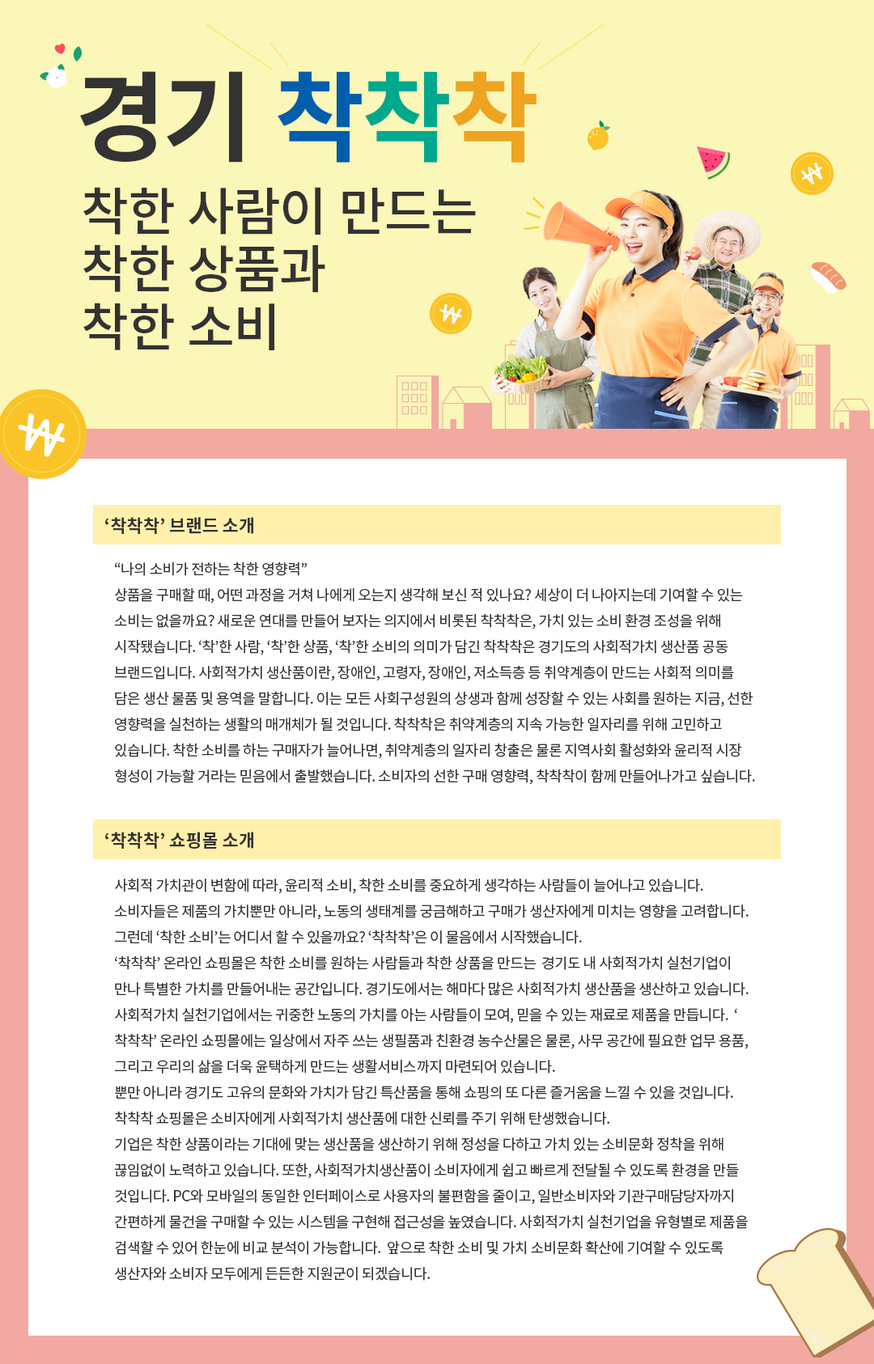
<style>
.page{position:relative;width:874px;height:1364px;background:#ffffff}
.page>*{position:absolute;margin:0}
.t1{font:98.1px "NotoSansCJKkr-Bold";letter-spacing:-0.03em;color:#333333}
.t2{font:98.1px "NotoSansCJKkr-Bold";letter-spacing:-0.03em;color:#015eac}
.t3{font:98.1px "NotoSansCJKkr-Bold";letter-spacing:-0.03em;color:#00a88e}
.t4{font:98.1px "NotoSansCJKkr-Bold";letter-spacing:-0.03em;color:#eea421}
.t5{font:51.7px/57.7px "NotoSansCJKkr-Medium";letter-spacing:-0.03em;color:#333333}
.t6{font:17.8px "NotoSansCJKkr-Bold";color:#333333}
.t7{font:14.6px/25.9px "NotoSansCJKkr-Regular";letter-spacing:-0.03em;color:#333333}
</style>
<div class="page">
<p class="t1" style="left:80px;top:71px;width:457px;height:92px">경기 <span class="t2">착</span><span class="t3">착</span><span class="t4">착</span></p>
<p class="t5" style="left:83px;top:187px;width:393px;height:163px">착한 사람이 만드는<br>착한 상품과<br>착한 소비</p>
<p class="t6" style="left:105px;top:517px;width:148px;height:17px">‘착착착’ 브랜드 소개</p>
<p class="t7" style="left:114px;top:562px;width:641px;height:223px">“나의 소비가 전하는 착한 영향력”<br>상품을 구매할 때, 어떤 과정을 거쳐 나에게 오는지 생각해 보신 적 있나요? 세상이 더 나아지는데 기여할 수 있는 소비는 없을까요? 새로운 연대를 만들어 보자는 의지에서 비롯된 착착착은, 가치 있는 소비 환경 조성을 위해 시작됐습니다. ‘착’한 사람, ‘착’한 상품, ‘착’한 소비의 의미가 담긴 착착착은 경기도의 사회적가치 생산품 공동 브랜드입니다. 사회적가치 생산품이란, 장애인, 고령자, 장애인, 저소득층 등 취약계층이 만드는 사회적 의미를 담은 생산 물품 및 용역을 말합니다. 이는 모든 사회구성원의 상생과 함께 성장할 수 있는 사회를 원하는 지금, 선한 영향력을 실천하는 생활의 매개체가 될 것입니다. 착착착은 취약계층의 지속 가능한 일자리를 위해 고민하고 있습니다. 착한 소비를 하는 구매자가 늘어나면, 취약계층의 일자리 창출은 물론 지역사회 활성화와 윤리적 시장 형성이 가능할 거라는 믿음에서 출발했습니다. 소비자의 선한 구매 영향력, 착착착이 함께 만들어나가고 싶습니다.</p>
<p class="t6" style="left:105px;top:832px;width:148px;height:17px">‘착착착’ 쇼핑몰 소개</p>
<p class="t7" style="left:114px;top:878px;width:635px;height:403px">사회적 가치관이 변함에 따라, 윤리적 소비, 착한 소비를 중요하게 생각하는 사람들이 늘어나고 있습니다.<br>소비자들은 제품의 가치뿐만 아니라, 노동의 생태계를 궁금해하고 구매가 생산자에게 미치는 영향을 고려합니다. 그런데 ‘착한 소비’는 어디서 할 수 있을까요? ‘착착착’은 이 물음에서 시작했습니다.<br>‘착착착’ 온라인 쇼핑몰은 착한 소비를 원하는 사람들과 착한 상품을 만드는  경기도 내 사회적가치 실천기업이 만나 특별한 가치를 만들어내는 공간입니다. 경기도에서는 해마다 많은 사회적가치 생산품을 생산하고 있습니다.  사회적가치 실천기업에서는 귀중한 노동의 가치를 아는 사람들이 모여, 믿을 수 있는 재료로 제품을 만듭니다.  ‘착착착’ 온라인 쇼핑몰에는 일상에서 자주 쓰는 생필품과 친환경 농수산물은 물론, 사무 공간에 필요한 업무 용품, 그리고 우리의 삶을 더욱 윤택하게 만드는 생활서비스까지 마련되어 있습니다. <br>뿐만 아니라 경기도 고유의 문화와 가치가 담긴 특산품을 통해 쇼핑의 또 다른 즐거움을 느낄 수 있을 것입니다. 착착착 쇼핑몰은 소비자에게 사회적가치 생산품에 대한 신뢰를 주기 위해 탄생했습니다.<br>기업은 착한 상품이라는 기대에 맞는 생산품을 생산하기 위해 정성을 다하고 가치 있는 소비문화 정착을 위해 끊임없이 노력하고 있습니다. 또한, 사회적가치생산품이 소비자에게 쉽고 빠르게 전달될 수 있도록 환경을 만들 것입니다. PC와 모바일의 동일한 인터페이스로 사용자의 불편함을 줄이고, 일반소비자와 기관구매담당자까지 간편하게 물건을 구매할 수 있는 시스템을 구현해 접근성을 높였습니다. 사회적가치 실천기업을 유형별로 제품을 검색할 수 있어 한눈에 비교 분석이 가능합니다.  앞으로 착한 소비 및 가치 소비문화 확산에 기여할 수 있도록 생산자와 소비자 모두에게 든든한 지원군이 되겠습니다.</p>
</div>
